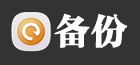
<style>
.page{position:relative;width:140px;height:65px;background:#333333}
.page>*{position:absolute;margin:0}
.t1{font:36px "FZFYSJW--GB1-0";color:#ffffff;font-weight:bold}
</style>
<div class="page">
<p class="t1" style="left:54px;top:13px;width:74px;height:35px">备份</p>
</div>
